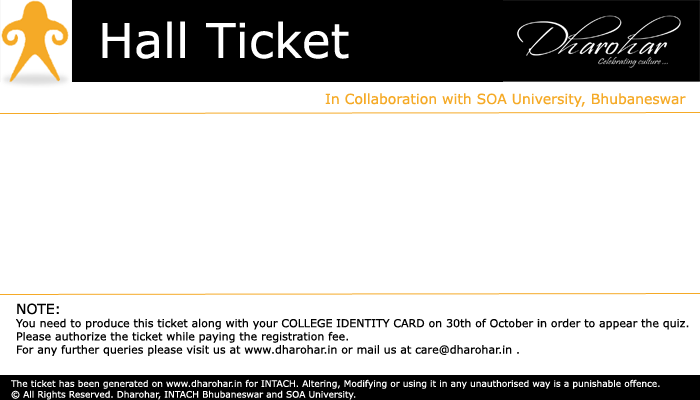
<style>
.page{position:relative;width:700px;height:400px;background:#ffffff}
.page>*{position:absolute;margin:0}
.t1{font:48px "Verdana";color:#ffffff}
.t2{font:14px "Verdana";color:#f5aa27}
.t3{font:11px "Verdana";color:#000000}
.t4{font:14px "Verdana";color:#000000}
.t5{font:9px "Verdana";color:#ffffff}
</style>
<div class="page">
<p class="t1" style="left:102px;top:21px;width:247px;height:38px">Hall Ticket</p>
<p class="t2" style="left:325px;top:93px;width:361px;height:14px">In Collaboration with SOA University, Bhubaneswar</p>
<p class="t3" style="left:16px;top:303px;width:673px;height:53px"><span class="t4">NOTE:<br></span>You need to produce this ticket along with your COLLEGE IDENTITY CARD on 30th of October in order to appear the quiz.<br>Please authorize the ticket while paying the registration fee.<br>For any further queries please visit us at www.dharohar.in or mail us at care@dharohar.in .</p>
<p class="t5" style="left:11px;top:379px;width:649px;height:21px">The ticket has been generated on www.dharohar.in for INTACH. Altering, Modifying or using it in any unauthorised way is a punishable offence.<br>© All Rights Reserved. Dharohar, INTACH Bhubaneswar and SOA University.</p>
</div>
